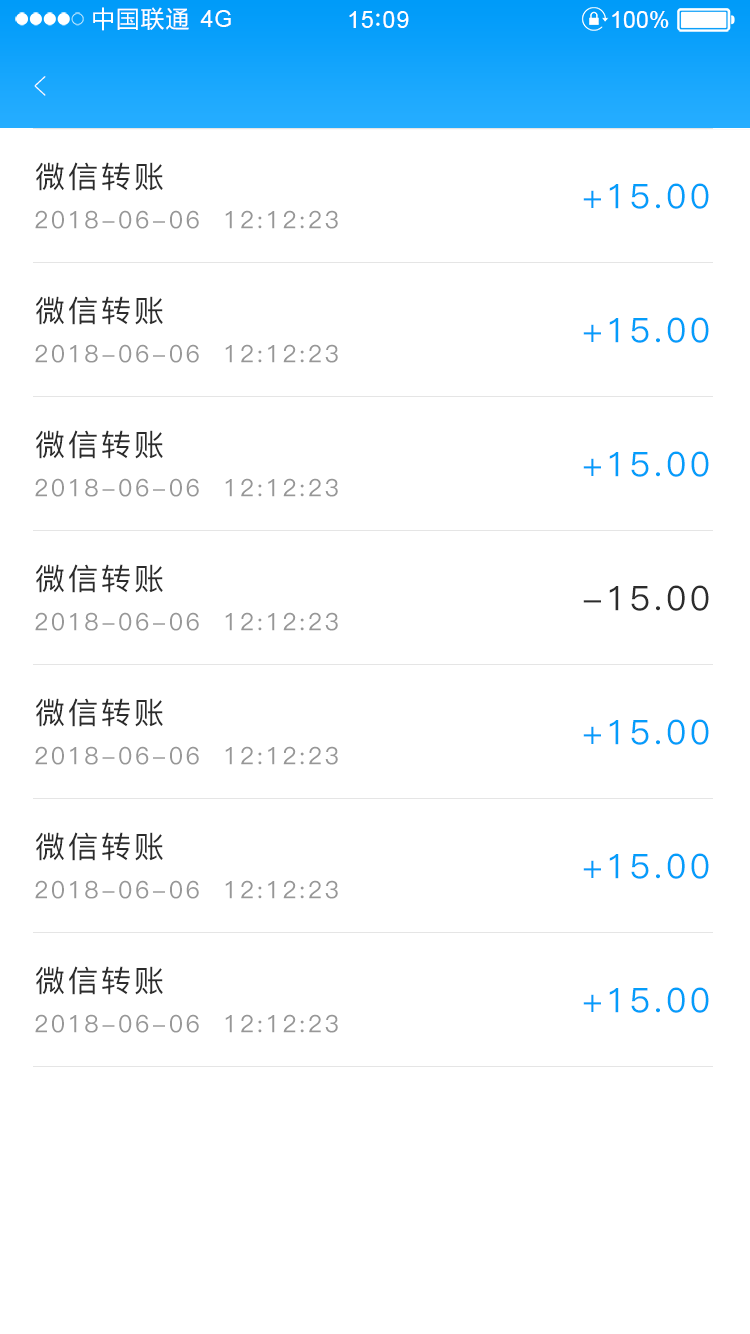
<style>
.page{position:relative;width:750px;height:1334px;background:#ffffff}
.page>*{position:absolute;margin:0}
.t1{font:23.4px "MicrosoftYaHei";letter-spacing:0.06em;color:#ffffff}
.t2{font:23.4px "ArialMT";letter-spacing:0.02em;color:#ffffff}
.t3{font:23.4px "ArialMT";letter-spacing:0.04em;color:#ffffff}
.t4{font:23.4px "ArialMT";color:#ffffff}
.t5{font:39px "PingFang-SC-ExtraLight";letter-spacing:0.1em;color:#ffffff;scale:0.51 1}
.t6{font:30px "PingFang-SC-Medium";letter-spacing:0.1em;color:#2c2c2c}
.t7{font:34px "PingFang-SC-Medium";letter-spacing:0.1em;color:#049dfa}
.t8{font:24px "PingFang-SC-Medium";letter-spacing:0.1em;color:#979797}
.t9{font:34px "PingFang-SC-Medium";letter-spacing:0.1em;color:#2c2c2c}
</style>
<div class="page">
<p class="t1" style="left:93px;top:7px;width:96px;height:24px">中国联通</p>
<p class="t2" style="left:200px;top:10px;width:31px;height:17px">4G</p>
<p class="t3" style="left:349px;top:11px;width:60px;height:17px">15 09</p>
<p class="t4" style="left:612px;top:11px;width:57px;height:17px">100%</p>
<p class="t5" style="left:34px;top:76px;width:12px;height:20px;rotate:180deg">&gt;</p>
<p class="t6" style="left:36px;top:162px;width:127px;height:29px">微信转账</p>
<p class="t7" style="left:583px;top:183px;width:126px;height:26px">+15.00</p>
<p class="t8" style="left:35px;top:210px;width:303px;height:19px">2018-06-06  12:12:23</p>
<p class="t6" style="left:36px;top:296px;width:127px;height:29px">微信转账</p>
<p class="t7" style="left:583px;top:317px;width:126px;height:26px">+15.00</p>
<p class="t8" style="left:35px;top:344px;width:303px;height:19px">2018-06-06  12:12:23</p>
<p class="t6" style="left:36px;top:430px;width:127px;height:29px">微信转账</p>
<p class="t7" style="left:583px;top:451px;width:126px;height:26px">+15.00</p>
<p class="t8" style="left:35px;top:478px;width:303px;height:19px">2018-06-06  12:12:23</p>
<p class="t6" style="left:36px;top:564px;width:127px;height:29px">微信转账</p>
<p class="t9" style="left:583px;top:585px;width:126px;height:26px">-15.00</p>
<p class="t8" style="left:35px;top:612px;width:303px;height:19px">2018-06-06  12:12:23</p>
<p class="t6" style="left:36px;top:698px;width:127px;height:29px">微信转账</p>
<p class="t7" style="left:583px;top:719px;width:126px;height:26px">+15.00</p>
<p class="t8" style="left:35px;top:746px;width:303px;height:19px">2018-06-06  12:12:23</p>
<p class="t6" style="left:36px;top:832px;width:127px;height:29px">微信转账</p>
<p class="t7" style="left:583px;top:853px;width:126px;height:26px">+15.00</p>
<p class="t8" style="left:35px;top:880px;width:303px;height:19px">2018-06-06  12:12:23</p>
<p class="t6" style="left:36px;top:966px;width:127px;height:29px">微信转账</p>
<p class="t7" style="left:583px;top:987px;width:126px;height:26px">+15.00</p>
<p class="t8" style="left:35px;top:1014px;width:303px;height:19px">2018-06-06  12:12:23</p>
</div>
